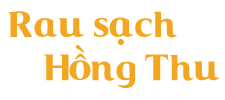
<style>
.page{position:relative;width:225px;height:100px;background:#ffffff}
.page>*{position:absolute;margin:0}
.t1{font:36px "Coke4U";color:#f3a61f}
</style>
<div class="page">
<p class="t1" style="left:8px;top:11px;width:212px;height:77px">Rau sạch<br>    Hồng Thu</p>
</div>
